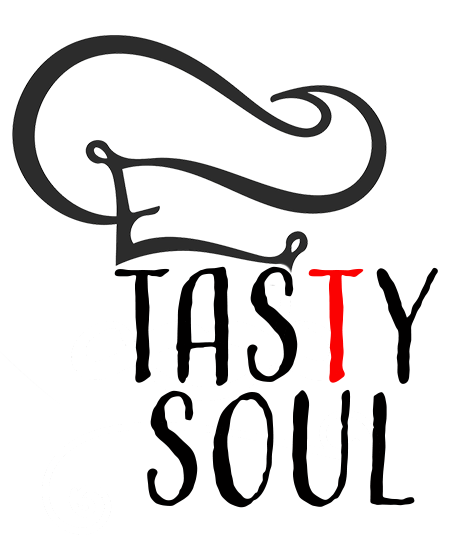
<style>
.page{position:relative;width:465px;height:539px;background:#ffffff}
.page>*{position:absolute;margin:0}
.t1{font:150px "AdornCondensedSans";color:#010000}
.t2{font:150px "AdornCondensedSans";color:#fb0202}
</style>
<div class="page">
<p class="t1" style="left:114px;top:266px;width:324px;height:120px">tas<span class="t2">t</span>y</p>
<p class="t1" style="left:147px;top:389px;width:268px;height:119px">soul</p>
</div>
